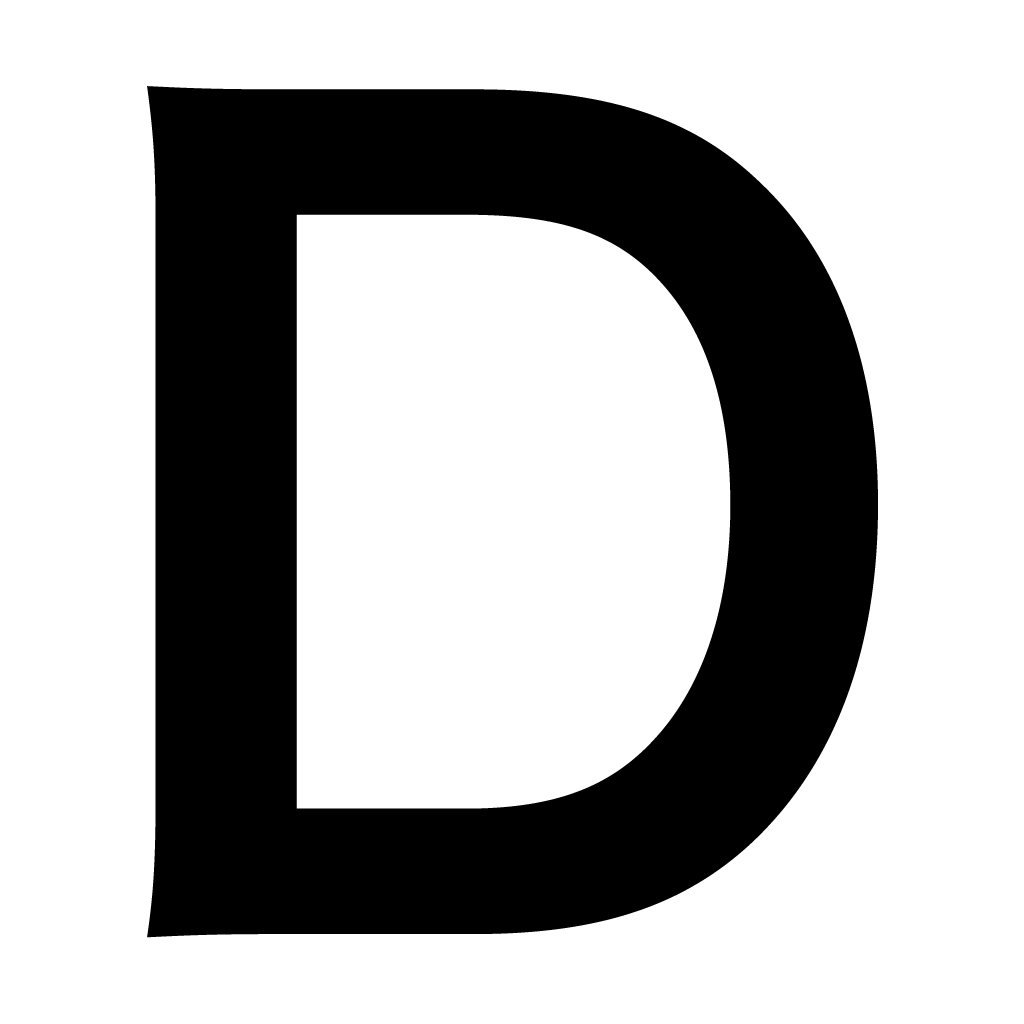
<style>
.page{position:relative;width:1024px;height:1024px;background:#ffffff}
.page>*{position:absolute;margin:0}
.t1{font:1061px "HiraginoSansGB-W6";color:#000000}
</style>
<div class="page">
<p class="t1" style="left:147px;top:86px;width:731px;height:852px">D</p>
</div>
